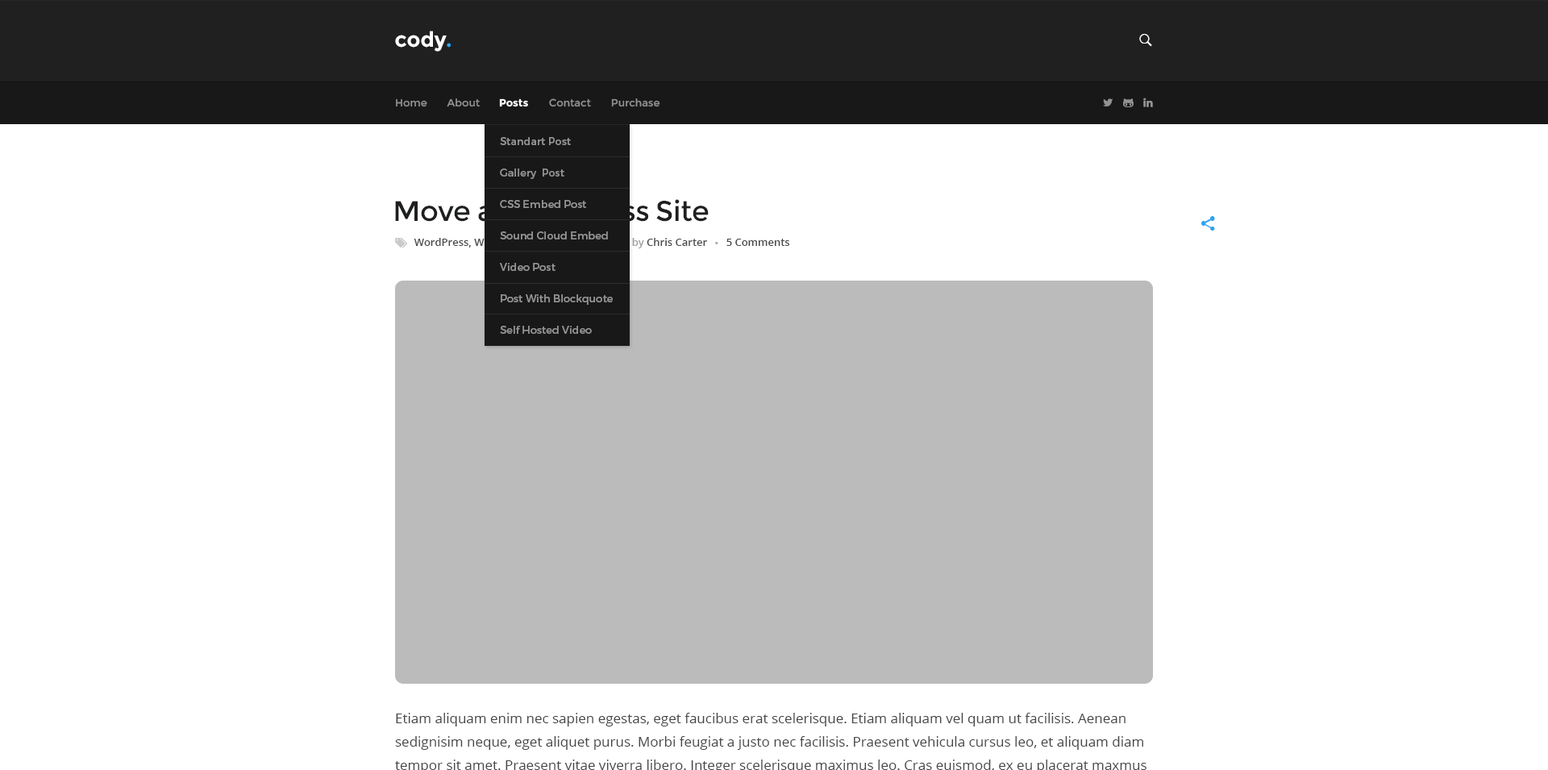
<style>
.page{position:relative;width:1548px;height:770px;background:#ffffff}
.page>*{position:absolute;margin:0}
.t1{font:21px "Montserrat-Bold";color:#ffffff}
.t2{font:21px "Montserrat-Bold";color:#2fa4f2}
.t3{font:10.5px "Montserrat-Regular";color:#929292}
.t4{font:10.5px "Montserrat-Bold";color:#ffffff}
.t5{font:10.5px/31.5px "Montserrat-Regular";color:#929292}
.t6{font:28.2px "Montserrat-Regular";letter-spacing:-0.02em;color:#1e1f1f}
.t7{font:10.5px "OpenSans-Semibold";color:#4b4b4b}
.t8{font:10.5px "OpenSans-Semibold";color:#a1a1a1}
.t9{font:9.7px "OpenSans-Semibold";color:#a5a5a5}
</style>
<div class="page">
<p class="t1" style="left:395px;top:31px;width:56px;height:21px">cody<span class="t2">.</span></p>
<p class="t3" style="left:396px;top:98px;width:264px;height:9px">Home       About                        Contact       Purchase</p>
<p class="t4" style="left:499px;top:98px;width:29px;height:9px">Posts</p>
<p class="t5" style="left:500px;top:137px;width:113px;height:197px">Standart Post<br>Gallery  Post<br>CSS Embed Post<br>Sound Cloud Embed<br>Video Post<br>Post With Blockquote<br>Self Hosted Video</p>
<p class="t6" style="left:395px;top:199px;width:314px;height:23px">Move a WordPress Site</p>
<p class="t7" style="left:414px;top:238px;width:83px;height:10px">WordPress, Web</p>
<p class="t7" style="left:632px;top:238px;width:75px;height:10px"><span class="t8">by </span>Chris Carter</p>
<p class="t9" style="left:715px;top:242px;width:4px;height:2px">•</p>
<p class="t7" style="left:727px;top:239px;width:62px;height:7px">5 Comments</p>
</div>
